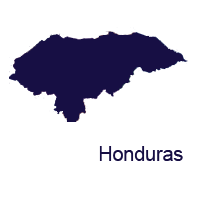
<style>
.page{position:relative;width:200px;height:200px;background:#ffffff}
.page>*{position:absolute;margin:0}
.t1{font:20.8px "ArialMT";color:#170f44;scale:0.94 1}
</style>
<div class="page">
<p class="t1" style="left:99px;top:146px;width:84px;height:15px">Honduras</p>
</div>
